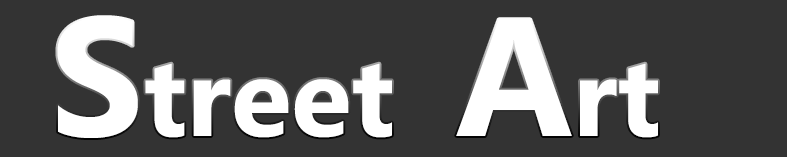
<style>
.page{position:relative;width:787px;height:157px;background:#333333}
.page>*{position:absolute;margin:0}
.t1{font:111.1px "Ebrima-Bold";color:#ffffff}
.t2{font:166.7px "Ebrima-Bold";color:#ffffff}
</style>
<div class="page">
<p class="t1" style="left:57px;top:17px;width:601px;height:121px"><span class="t2">S</span>treet  <span class="t2">A</span>rt</p>
</div>
